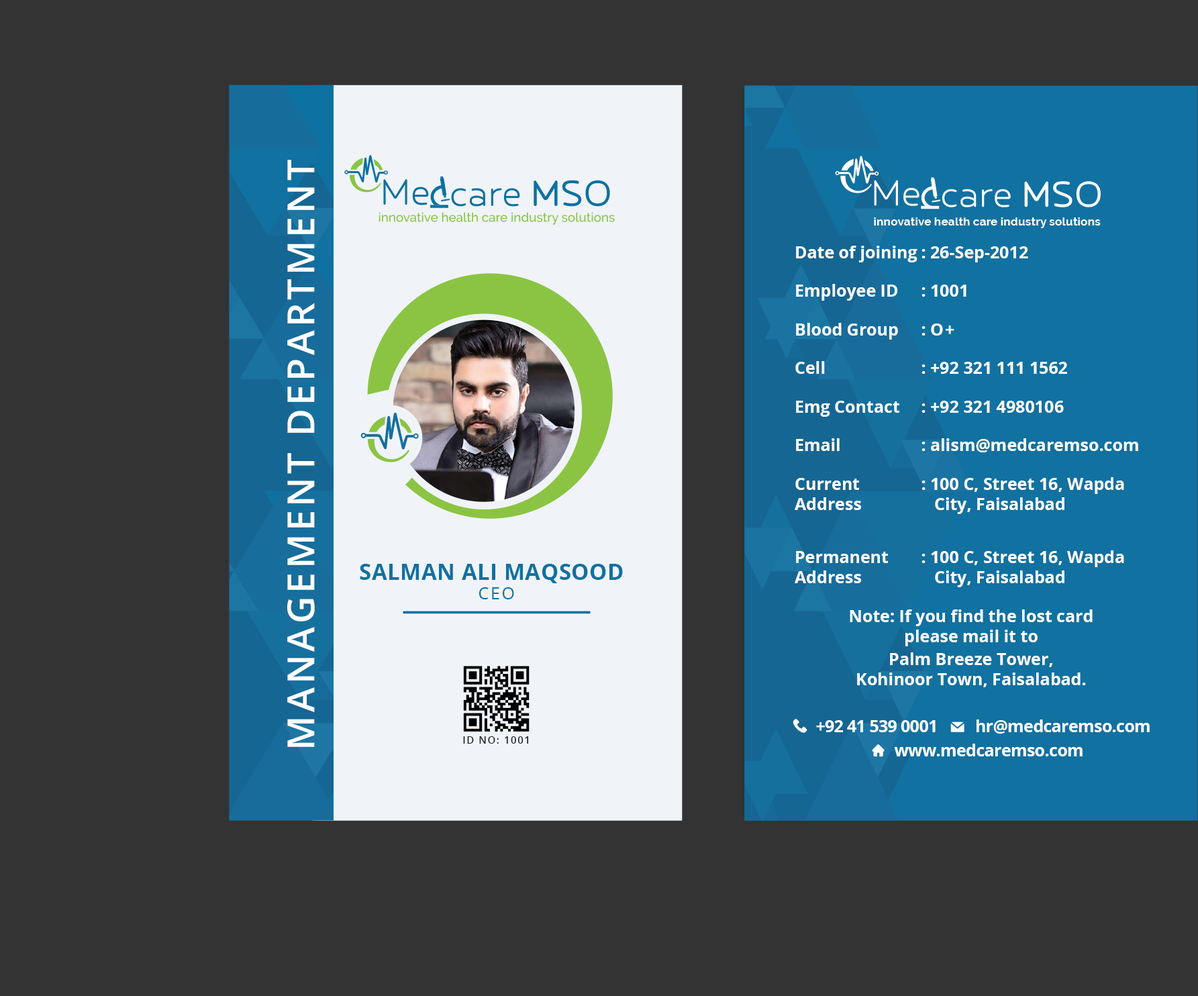
<style>
.page{position:relative;width:1198px;height:996px;background:#333333}
.page>*{position:absolute;margin:0}
.t1{font:37.4px/156.3px "OpenSans-Semibold";letter-spacing:0.09em;color:#ffffff}
.t2{font:11.7px "Raleway-Bold";color:#ffffff}
.t3{font:16.8px "OpenSans-Bold";color:#ffffff}
.t4{font:22.4px "OpenSans-Bold";letter-spacing:0.01em;color:#1171a1}
.t5{font:16.8px "OpenSans";letter-spacing:0.11em;color:#1171a1}
.t6{font:16.8px "OpenSans-Bold";letter-spacing:-0.025em;color:#ffffff}
.t7{font:9.9px "OpenSans-Semibold";letter-spacing:0.11em;color:#282828}
</style>
<div class="page">
<p class="t1" style="left:287px;top:160px;width:28px;height:587px;text-align:center">MANAGEMENT DEPARTMENT</p>
<p class="t2" style="left:874px;top:217px;width:226px;height:11px">innovative health care industry solutions</p>
<p class="t3" style="left:796px;top:246px;width:121px;height:16px">Date of joining</p>
<p class="t3" style="left:921px;top:246px;width:107px;height:16px">: 26-Sep-2012</p>
<p class="t3" style="left:796px;top:284px;width:101px;height:17px">Employee ID</p>
<p class="t3" style="left:921px;top:284px;width:45px;height:13px">: 1001</p>
<p class="t3" style="left:796px;top:323px;width:102px;height:16px">Blood Group</p>
<p class="t3" style="left:921px;top:323px;width:33px;height:12px">: O+</p>
<p class="t3" style="left:795px;top:361px;width:30px;height:13px">Cell</p>
<p class="t3" style="left:921px;top:362px;width:146px;height:12px">: +92 321 111 1562</p>
<p class="t3" style="left:796px;top:401px;width:103px;height:16px">Emg Contact</p>
<p class="t3" style="left:921px;top:401px;width:142px;height:12px">: +92 321 4980106</p>
<p class="t3" style="left:796px;top:438px;width:43px;height:13px">Email</p>
<p class="t3" style="left:921px;top:438px;width:217px;height:14px">: alism@medcaremso.com</p>
<p class="t3" style="left:794px;top:478px;width:67px;height:32px">Current <br>Address</p>
<p class="t3" style="left:921px;top:477px;width:203px;height:37px">: 100 C, Street 16, Wapda<br>   City, Faisalabad</p>
<p class="t3" style="left:794px;top:551px;width:94px;height:32px">Permanent <br>Address</p>
<p class="t3" style="left:921px;top:550px;width:203px;height:37px">: 100 C, Street 16, Wapda<br>   City, Faisalabad</p>
<p class="t4" style="left:360px;top:564px;width:263px;height:19px">SALMAN ALI MAQSOOD</p>
<p class="t5" style="left:478px;top:587px;width:36px;height:12px">CEO</p>
<p class="t3" style="left:849px;top:609px;width:243px;height:37px;text-align:center">Note: If you find the lost card<br>please mail it to</p>
<p class="t3" style="left:857px;top:652px;width:229px;height:35px;text-align:center">Palm Breeze Tower,<br>Kohinoor Town, Faisalabad.</p>
<p class="t6" style="left:816px;top:720px;width:119px;height:12px">+92 41 539 0001</p>
<p class="t6" style="left:976px;top:719px;width:173px;height:14px">hr@medcaremso.com</p>
<p class="t7" style="left:463px;top:736px;width:66px;height:7px">ID NO: 1001</p>
<p class="t6" style="left:894px;top:743px;width:188px;height:13px">www.medcaremso.com</p>
</div>
